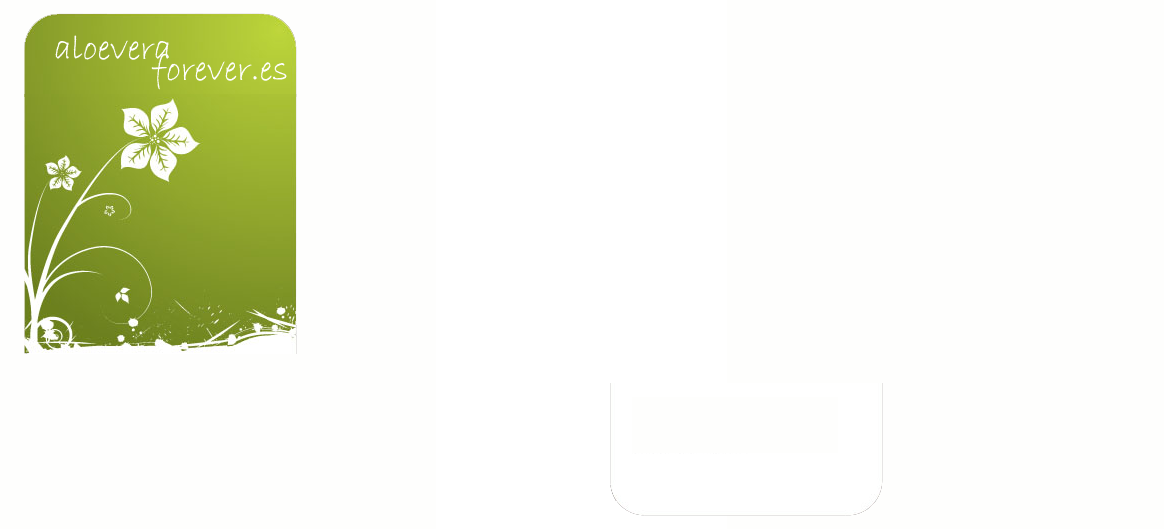
<style>
.page{position:relative;width:1164px;height:529px;background:#fefefd}
.page>*{position:absolute;margin:0}
.t1{font:36px "BradleyHandITC";color:#fefefd}
</style>
<div class="page">
<p class="t1" style="left:55px;top:35px;width:114px;height:25px">aloevera</p>
<p class="t1" style="left:151px;top:53px;width:136px;height:37px">forever.es</p>
</div>
